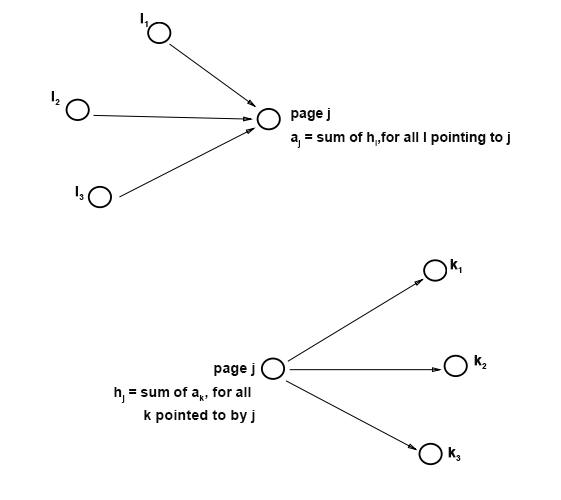
<style>
.page{position:relative;width:561px;height:500px;background:#ffffff}
.page>*{position:absolute;margin:0}
.t1{font:14px "Arial-BoldMT";color:#0b0b0b;font-weight:bold}
.t2{font:14px/23.4px "Arial-BoldMT";color:#0b0b0b}
</style>
<div class="page">
<p class="t1" style="left:140px;top:13px;width:8px;height:14px">l1</p>
<p class="t1" style="left:51px;top:91px;width:9px;height:14px">l2</p>
<p class="t2" style="left:290px;top:108px;width:220px;height:40px;text-align:justify">page j<br>aj = sum of hl,for all l pointing to j</p>
<p class="t1" style="left:75px;top:186px;width:9px;height:14px">l3</p>
<p class="t1" style="left:450px;top:259px;width:12px;height:14px">k1</p>
<p class="t2" style="left:114px;top:363px;width:141px;height:60px;text-align:right">page j<br>hj = sum of ak, for all <br>k pointed to by j</p>
<p class="t1" style="left:474px;top:355px;width:13px;height:14px">k2</p>
<p class="t1" style="left:448px;top:447px;width:13px;height:14px">k3</p>
</div>
